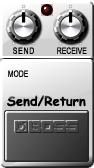
<style>
.page{position:relative;width:94px;height:168px}
.page>*{position:absolute;margin:0}
.t1{font:8.9px "ArialNarrow";letter-spacing:0.1em;color:#000000;scale:0.93 1}
.t2{font:8.9px "ArialNarrow";color:#000000;scale:0.93 1}
.t3{font:13px "ComicSansMS-Bold";color:#000000}
</style>
<div class="page">
<p class="t1" style="left:13px;top:47px;width:21px;height:7px">SEND</p>
<p class="t2" style="left:57px;top:47px;width:30px;height:7px">RECEIVE</p>
<p class="t2" style="left:8px;top:70px;width:20px;height:7px">MODE</p>
<p class="t3" style="left:7px;top:95px;width:79px;height:12px">Send/Return</p>
</div>
